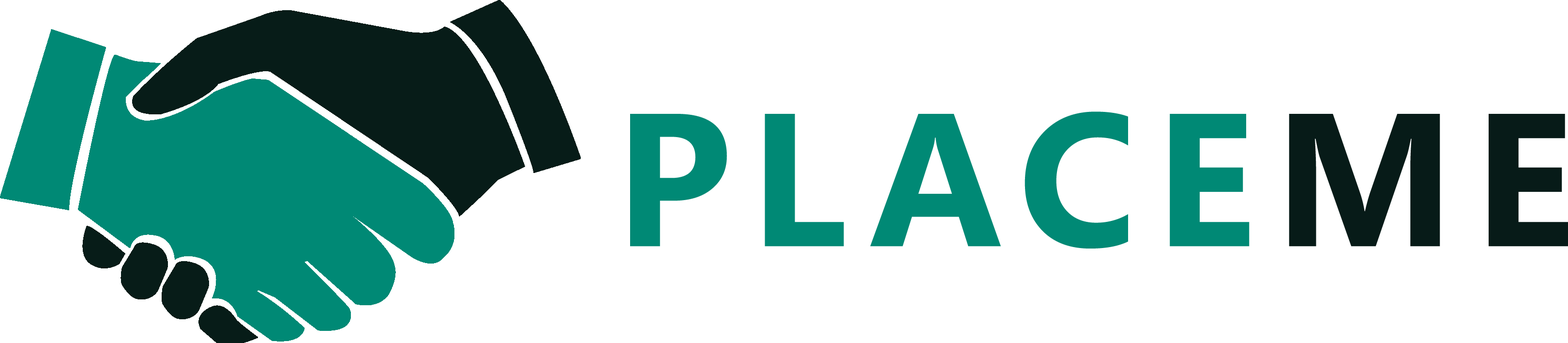
<style>
.page{position:relative;width:1568px;height:343px;background:#ffffff}
.page>*{position:absolute;margin:0}
.t1{font:188.7px "SegoeUI-Bold";letter-spacing:0.1em;color:#008975}
.t2{font:188.7px "SegoeUI-Bold";letter-spacing:0.1em;color:#071b18}
</style>
<div class="page">
<p class="t1" style="left:630px;top:111px;width:938px;height:137px">PLACE<span class="t2">ME</span></p>
</div>
